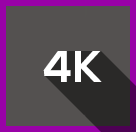
<style>
.page{position:relative;width:136px;height:132px;background:#545150}
.page>*{position:absolute;margin:0}
.t1{font:44px "NexaBold";color:#ffffff}
</style>
<div class="page">
<p class="t1" style="left:43px;top:51px;width:59px;height:31px">4K</p>
</div>
